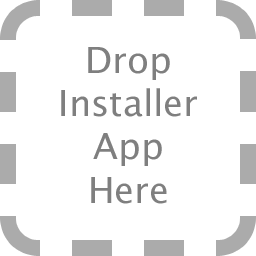
<style>
.page{position:relative;width:256px;height:256px;background:#ffffff}
.page>*{position:absolute;margin:0}
.t1{font:36px "LucidaGrande";color:#7f7f7f}
</style>
<div class="page">
<p class="t1" style="left:61px;top:47px;width:136px;height:157px;text-align:center">Drop<br>Installer<br>App<br>Here</p>
</div>
